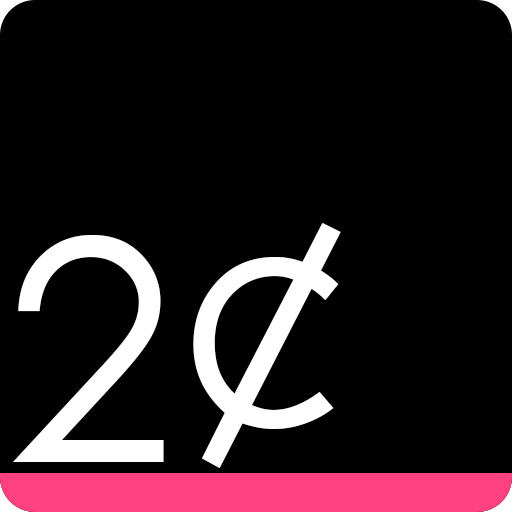
<style>
.page{position:relative;width:512px;height:512px;background:#000000}
.page>*{position:absolute;margin:0}
.t1{font:309.1px "CenturyGothic";color:#ffffff}
</style>
<div class="page">
<p class="t1" style="left:193px;top:223px;width:148px;height:245px">¢</p>
<p class="t1" style="left:13px;top:235px;width:151px;height:227px">2</p>
</div>
